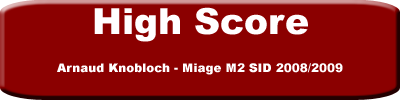
<style>
.page{position:relative;width:400px;height:100px;background:#8b0000}
.page>*{position:absolute;margin:0}
.t1{font:36px "Arial-Black";color:#fffeff}
.t2{font:12px "Arial-Black";color:#fffeff}
</style>
<div class="page">
<p class="t1" style="left:94px;top:7px;width:214px;height:35px">High Score</p>
<p class="t2" style="left:57px;top:63px;width:286px;height:12px">Arnaud Knobloch - Miage M2 SID 2008/2009</p>
</div>
